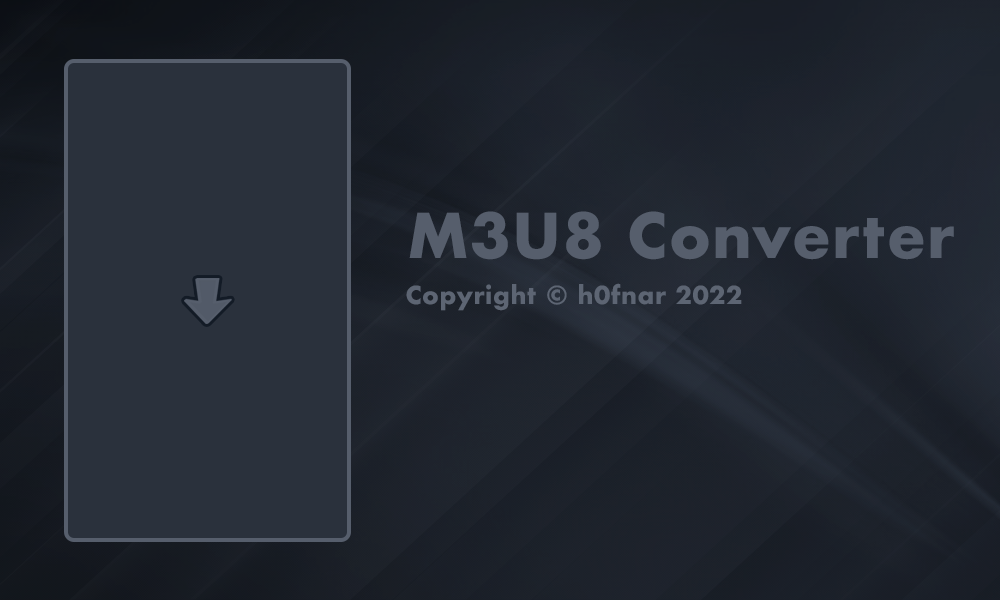
<style>
.page{position:relative;width:1000px;height:600px;background:#2a313c}
.page>*{position:absolute;margin:0}
.t1{font:60px "Futura-Bold";letter-spacing:0.025em;color:#565e6c}
.t2{font:24px "Futura-Bold";letter-spacing:0.025em;color:#5d6573}
</style>
<div class="page">
<p class="t1" style="left:409px;top:211px;width:545px;height:49px">M3U8 Converter</p>
<p class="t2" style="left:406px;top:283px;width:336px;height:28px">Copyright © h0fnar 2022</p>
</div>
